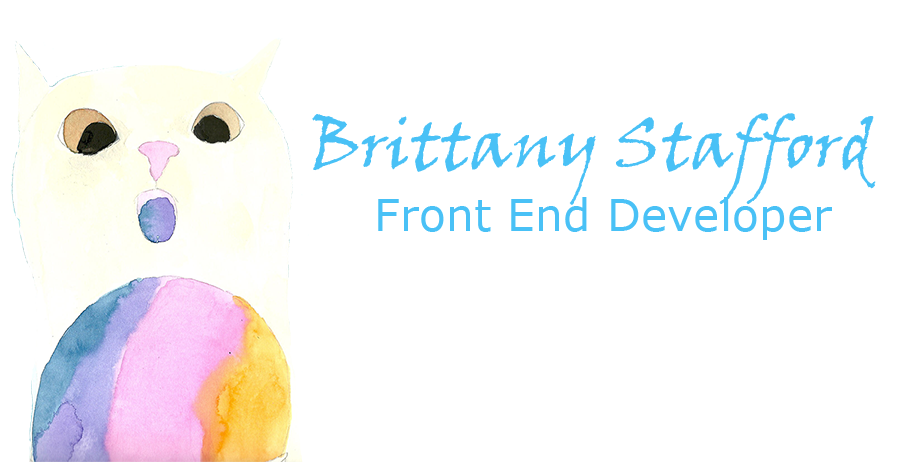
<style>
.page{position:relative;width:900px;height:462px;background:#ffffff}
.page>*{position:absolute;margin:0}
.t1{font:66.7px "VinerHandITC";color:#49c1f6}
.t2{font:44.4px "Verdana";color:#49c1f6}
</style>
<div class="page">
<p class="t1" style="left:312px;top:113px;width:564px;height:92px">Brittany Stafford</p>
<p class="t2" style="left:378px;top:197px;width:454px;height:43px">Front End Developer</p>
</div>
